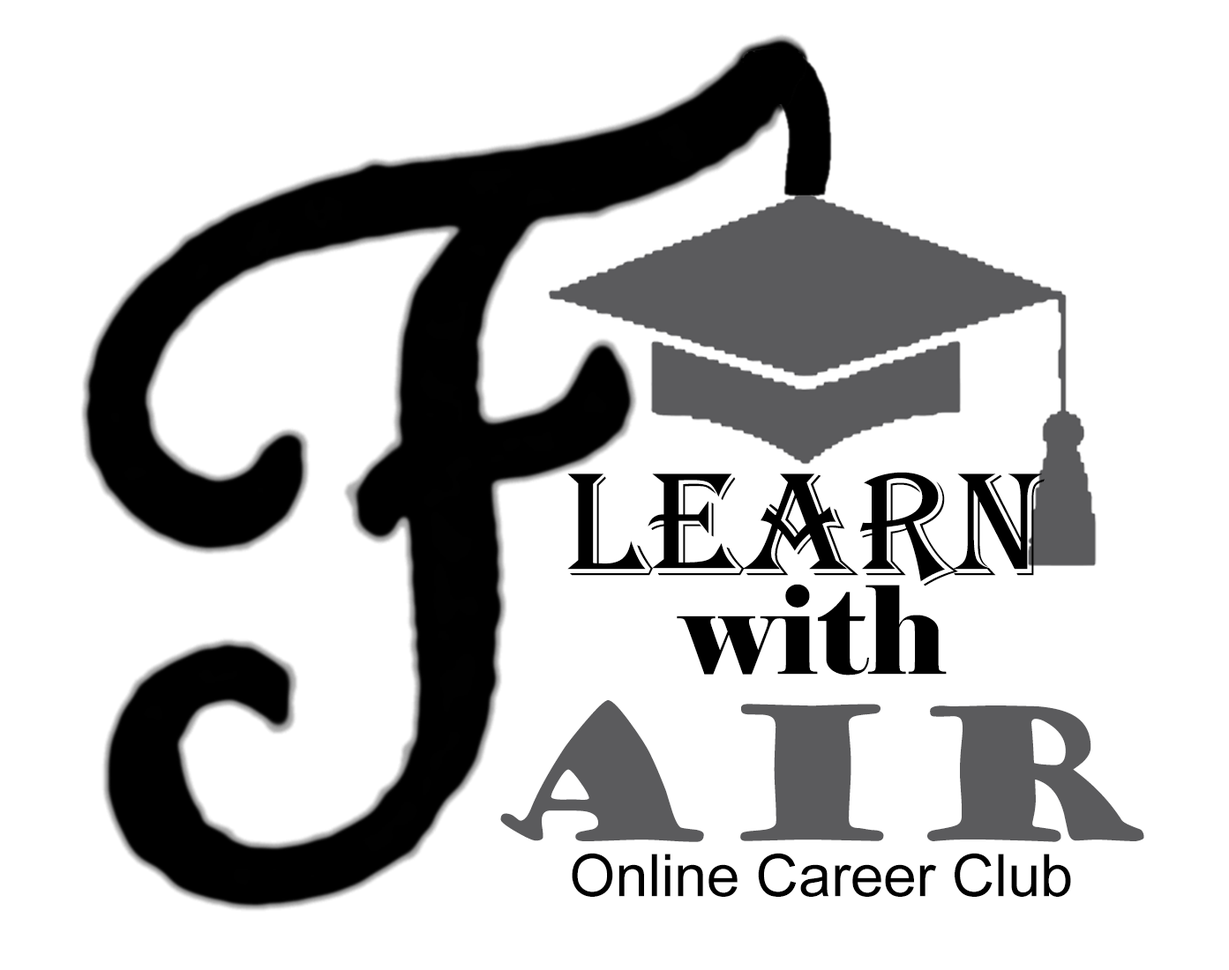
<style>
.page{position:relative;width:1229px;height:970px;background:#ffffff}
.page>*{position:absolute;margin:0}
.t1{font:151.9px "Algerian";color:#000000}
.t2{font:121.5px "Elephant-Regular";color:#000000}
.t3{font:182.3px "GoudyStout";color:#5b5b5d}
.t4{font:58.8px "ArialMT";color:#000000}
</style>
<div class="page">
<p class="t1" style="left:567px;top:472px;width:477px;height:115px">LEARN</p>
<p class="t2" style="left:677px;top:584px;width:270px;height:92px">with</p>
<p class="t3" style="left:500px;top:700px;width:644px;height:142px">air</p>
<p class="t4" style="left:572px;top:853px;width:499px;height:44px">Online Career Club</p>
</div>
